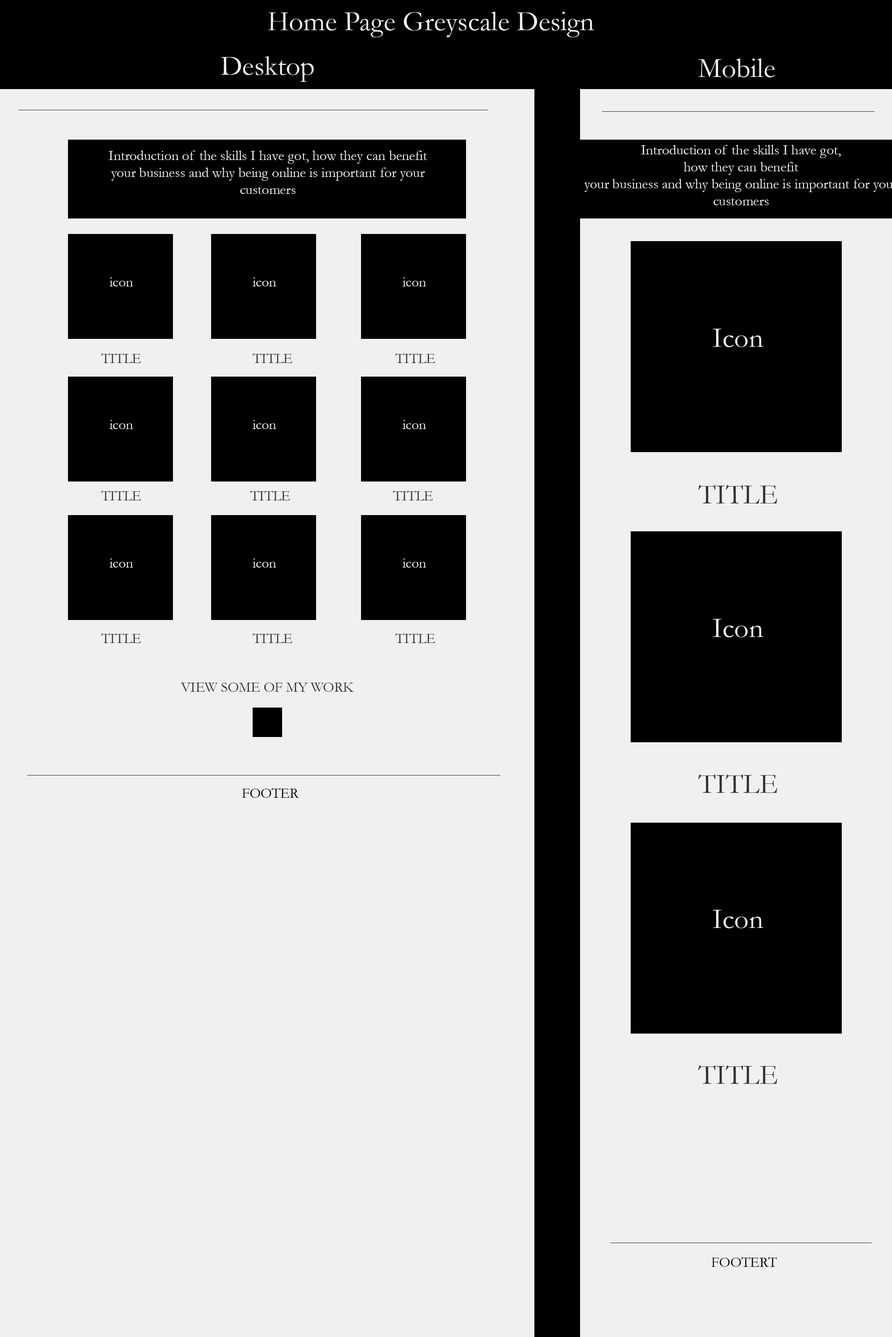
<style>
.page{position:relative;width:892px;height:1337px;background:#f0f0f0}
.page>*{position:absolute;margin:0}
.t1{font:28.3px "Garamond";color:#f0f0f0}
.t2{font:14.2px "Garamond";color:#f0f0f0}
.t3{font:28.5px "Garamond";color:#f0f0f0}
.t4{font:14.2px "Garamond";color:#313131}
.t5{font:28.3px "Garamond";color:#313131}
.t6{font:14.2px "Garamond";color:#000000}
</style>
<div class="page">
<p class="t1" style="left:268px;top:12px;width:326px;height:25px">Home Page Greyscale Design</p>
<p class="t1" style="left:220px;top:56px;width:94px;height:26px">Desktop</p>
<p class="t1" style="left:698px;top:59px;width:77px;height:18px">Mobile</p>
<p class="t2" style="left:108px;top:151px;width:319px;height:43px;text-align:center">Introduction of the skills I have got, how they can benefit<br>your business and why being online is important for your<br>customers</p>
<p class="t2" style="left:109px;top:277px;width:24px;height:10px">icon</p>
<p class="t2" style="left:253px;top:277px;width:23px;height:10px">icon</p>
<p class="t2" style="left:402px;top:277px;width:24px;height:10px">icon</p>
<p class="t3" style="left:712px;top:329px;width:51px;height:18px">Icon</p>
<p class="t4" style="left:101px;top:353px;width:40px;height:10px">TITLE</p>
<p class="t4" style="left:253px;top:353px;width:39px;height:10px">TITLE</p>
<p class="t4" style="left:395px;top:353px;width:40px;height:10px">TITLE</p>
<p class="t2" style="left:109px;top:420px;width:24px;height:9px">icon</p>
<p class="t2" style="left:253px;top:420px;width:23px;height:9px">icon</p>
<p class="t2" style="left:402px;top:420px;width:24px;height:9px">icon</p>
<p class="t5" style="left:698px;top:485px;width:79px;height:19px">TITLE</p>
<p class="t4" style="left:101px;top:491px;width:40px;height:10px">TITLE</p>
<p class="t4" style="left:250px;top:491px;width:40px;height:10px">TITLE</p>
<p class="t4" style="left:393px;top:491px;width:40px;height:10px">TITLE</p>
<p class="t2" style="left:109px;top:559px;width:24px;height:9px">icon</p>
<p class="t2" style="left:253px;top:559px;width:23px;height:9px">icon</p>
<p class="t2" style="left:402px;top:559px;width:24px;height:9px">icon</p>
<p class="t3" style="left:712px;top:619px;width:51px;height:19px">Icon</p>
<p class="t4" style="left:101px;top:633px;width:40px;height:10px">TITLE</p>
<p class="t4" style="left:253px;top:633px;width:39px;height:10px">TITLE</p>
<p class="t4" style="left:395px;top:633px;width:40px;height:10px">TITLE</p>
<p class="t4" style="left:180px;top:683px;width:174px;height:9px">VIEW SOME OF MY WORK</p>
<p class="t5" style="left:698px;top:775px;width:79px;height:18px">TITLE</p>
<p class="t6" style="left:242px;top:788px;width:57px;height:10px">FOOTER</p>
<p class="t3" style="left:712px;top:910px;width:51px;height:19px">Icon</p>
<p class="t5" style="left:698px;top:1066px;width:79px;height:18px">TITLE</p>
<p class="t6" style="left:711px;top:1257px;width:65px;height:10px">FOOTERT</p>
</div>
